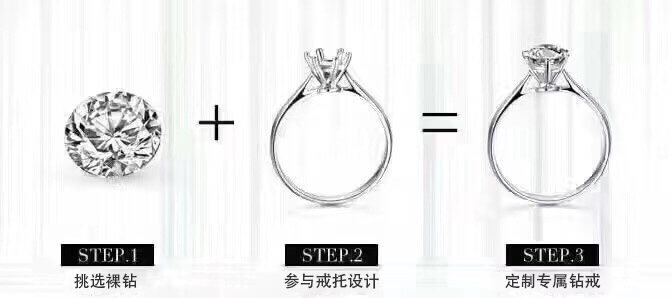
<style>
.page{position:relative;width:672px;height:298px}
.page>*{position:absolute;margin:0}
.t1{font:16px "AdobeHeitiStd-Regular";color:#333333}
</style>
<div class="page">
<p class="t1" style="left:74px;top:273px;width:63px;height:16px">挑选裸钻</p>
<p class="t1" style="left:284px;top:273px;width:95px;height:16px">参与戒托设计</p>
<p class="t1" style="left:505px;top:273px;width:96px;height:16px">定制专属钻戒</p>
</div>
